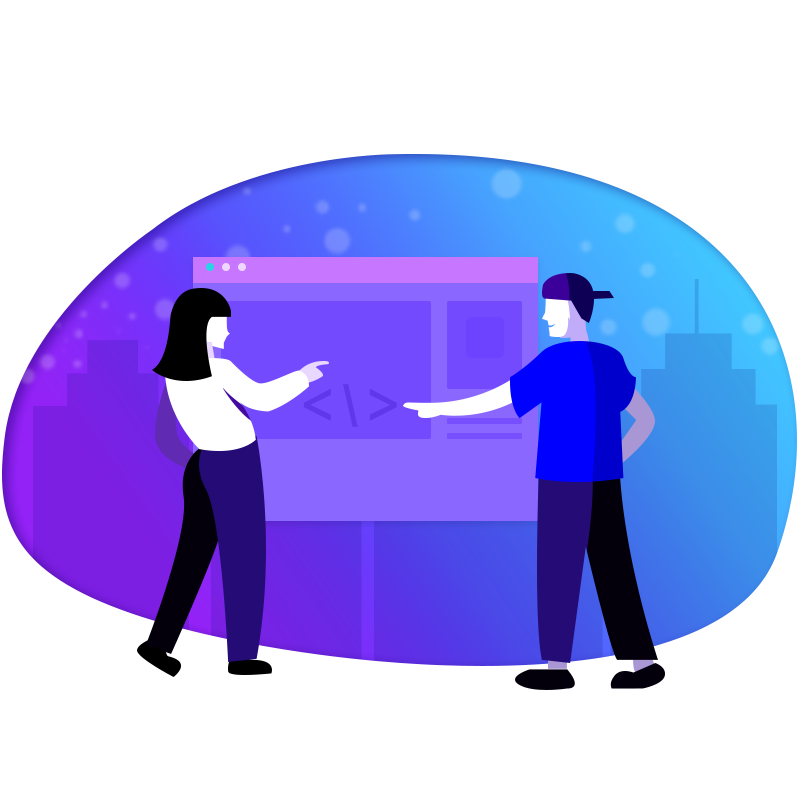
<style>
.page{position:relative;width:800px;height:800px;background:#ffffff}
.page>*{position:absolute;margin:0}
.t1{font:46.2px "FZLTCHK--GBK1-0";letter-spacing:0.2em;color:#6137ea}
</style>
<div class="page">
<p class="t1" style="left:303px;top:384px;width:94px;height:43px">&lt;\&gt;</p>
</div>
